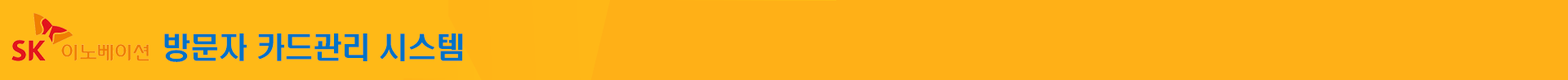
<style>
.page{position:relative;width:1568px;height:80px;background:#ffb017}
.page>*{position:absolute;margin:0}
.t1{font:29.4px "H2hdrM";letter-spacing:-0.03em;color:#0072c6}
</style>
<div class="page">
<p class="t1" style="left:164px;top:33px;width:299px;height:29px">방문자 카드관리 시스템</p>
</div>
